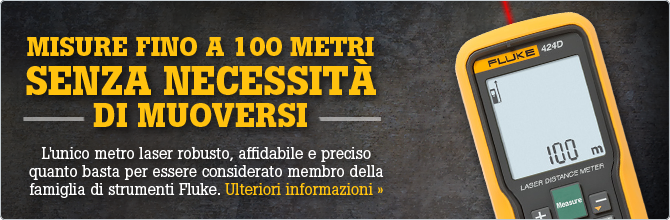
<style>
.page{position:relative;width:670px;height:220px}
.page>*{position:absolute;margin:0}
.t1{font:26.8px/44.8px "BotonPro-Bold";color:#ffc20e;text-transform:uppercase}
.t2{font:39.5px/39.5px "BotonPro-Bold";color:#ffc20e;text-transform:uppercase}
.t3{font:33.1px/32px "BotonPro-Bold";color:#ffc20e;text-transform:uppercase}
.t4{font:16px/18px "BotonPro-Regular";color:#ffffff}
.t5{font:16px/18px "BotonPro-Regular";color:#ffc20e}
</style>
<div class="page">
<p class="t1" style="left:26px;top:37px;width:350px;height:90px;text-align:center">Misure fino a 100 metri <br><span class="t2">senza necessità<br></span><span class="t3">di muoversi</span></p>
<p class="t4" style="left:29px;top:147px;width:355px;height:51px;text-align:center">L'unico metro laser robusto, affidabile e preciso quanto basta per essere considerato membro della famiglia di strumenti Fluke. <span class="t5">Ulteriori informazioni »</span></p>
</div>
